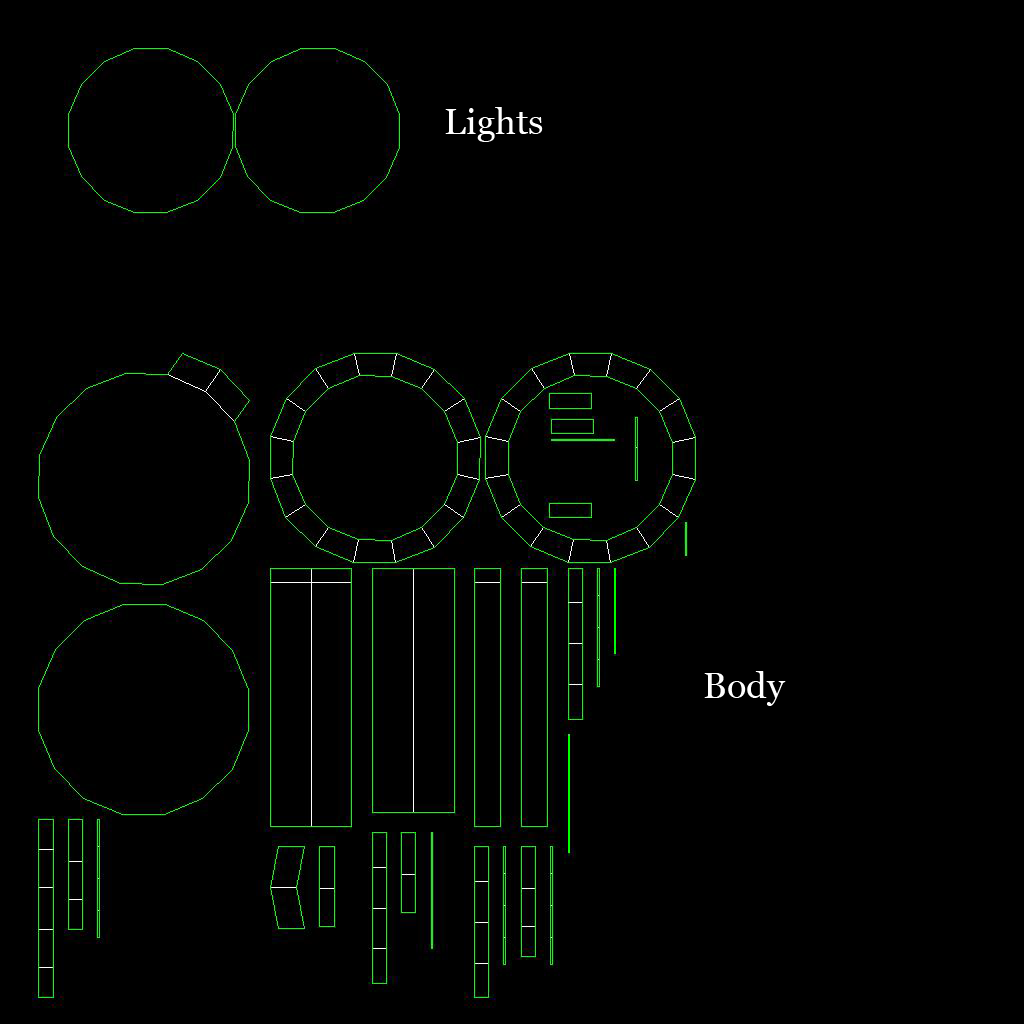
<style>
.page{position:relative;width:1024px;height:1024px;background:#000000}
.page>*{position:absolute;margin:0}
.t1{font:36px "Georgia";color:#ffffff}
</style>
<div class="page">
<p class="t1" style="left:445px;top:107px;width:98px;height:35px">Lights</p>
<p class="t1" style="left:704px;top:671px;width:82px;height:35px">Body</p>
</div>
